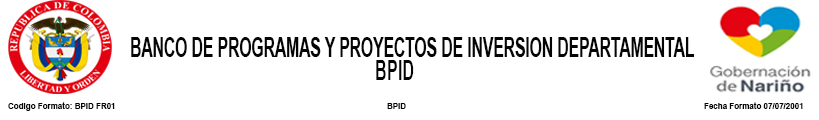
<style>
.page{position:relative;width:819px;height:120px;background:#ffffff}
.page>*{position:absolute;margin:0}
.t1{font:28.4px "Arial-BoldMT";color:#050505;scale:0.55 1}
.t2{font:28.4px "Arial-BoldMT";color:#050505;scale:0.58 1}
.t3{font:8px "Arial-BoldMT";color:#050505}
</style>
<div class="page">
<p class="t1" style="left:131px;top:37px;width:564px;height:20px">BANCO DE PROGRAMAS Y PROYECTOS DE INVERSION DEPARTAMENTAL</p>
<p class="t2" style="left:376px;top:60px;width:38px;height:20px">BPID</p>
<p class="t3" style="left:8px;top:102px;width:107px;height:9px">Codigo Formato: BPID FR01</p>
<p class="t3" style="left:704px;top:102px;width:99px;height:7px">Fecha Formato 07/07/2001</p>
<p class="t3" style="left:387px;top:103px;width:19px;height:6px">BPID</p>
</div>
